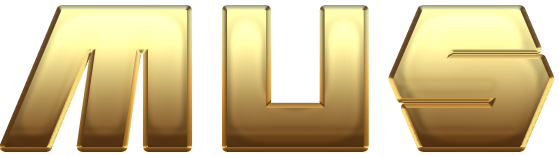
<style>
.page{position:relative;width:559px;height:156px;background:#ffffff}
.page>*{position:absolute;margin:0}
.t1{font:200px "Diagon";letter-spacing:0.15em}
</style>
<div class="page">
<p class="t1" style="left:4px;top:10px;width:546px;height:137px">MUS</p>
</div>
